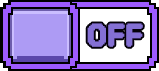
<style>
.page{position:relative;width:159px;height:71px;background:#ffffff}
.page>*{position:absolute;margin:0}
.t1{font:26px "DNFBitBitv2";color:#8470d4;text-transform:uppercase}
</style>
<div class="page">
<p class="t1" style="left:87px;top:23px;width:56px;height:24px">off</p>
</div>
